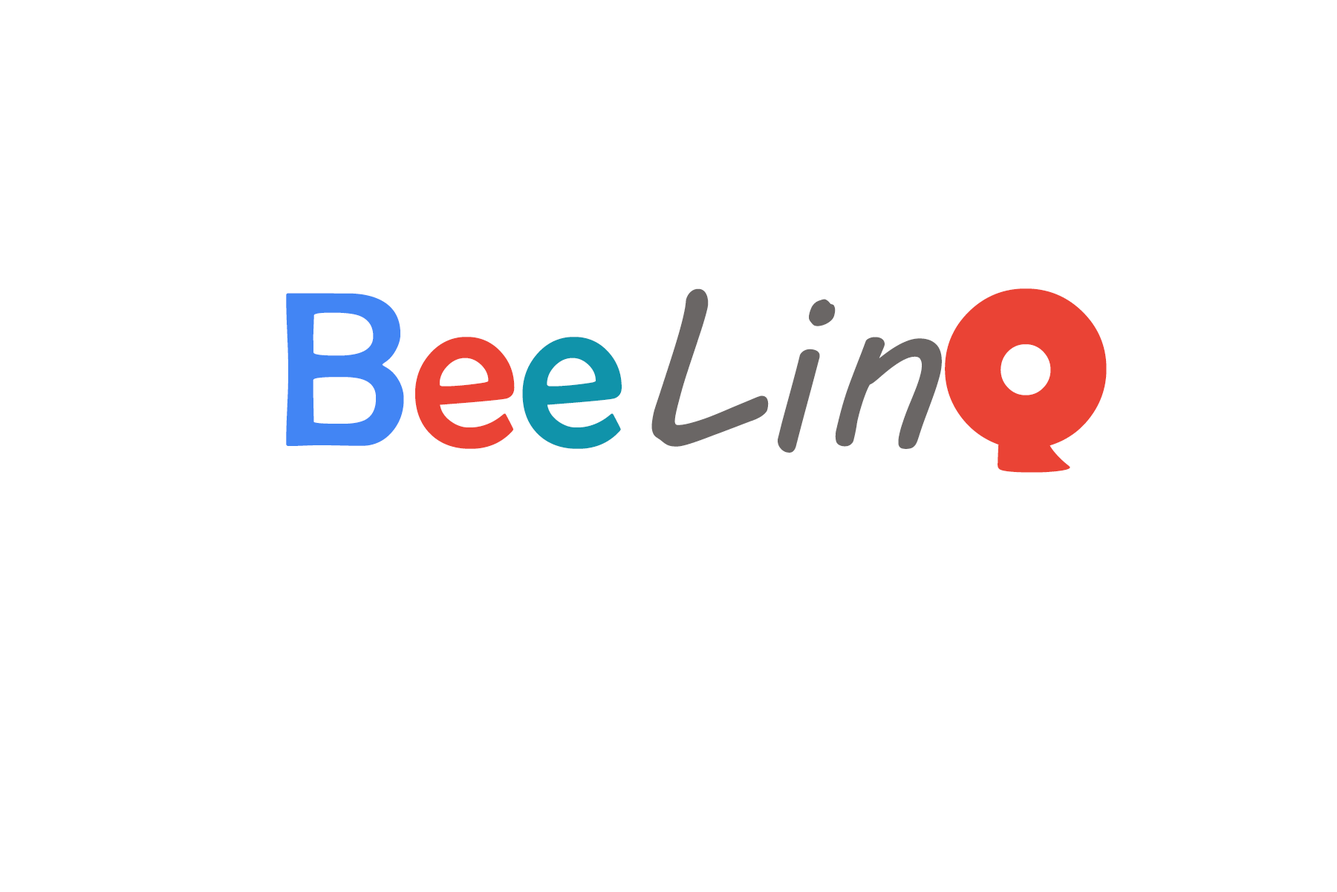
<style>
.page{position:relative;width:1337px;height:892px;background:#ffffff}
.page>*{position:absolute;margin:0}
.t1{font:222.9px "MVBoli";color:#6a6665}
.t2{font:222.9px "BerlinSansFB-Reg";color:#4285f4}
.t3{font:222.9px "BerlinSansFB-Reg";color:#ea4335}
.t4{font:222.9px "BerlinSansFB-Reg";color:#1093aa}
.t5{font:222.9px "BerlinSansFB-Bold";color:#ea4335}
</style>
<div class="page">
<p class="t1" style="left:286px;top:288px;width:821px;height:185px"><span class="t2">B</span><span class="t3">e</span><span class="t4">e</span>Lin<span class="t5">Q</span></p>
</div>
